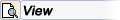
<style>
.page{position:relative;width:120px;height:20px;background:#f6f6f6}
.page>*{position:absolute;margin:0}
.t1{font:13px "ArialMT";color:#000000;font-weight:bold;font-style:italic}
</style>
<div class="page">
<p class="t1" style="left:23px;top:5px;width:30px;height:11px">View</p>
</div>
